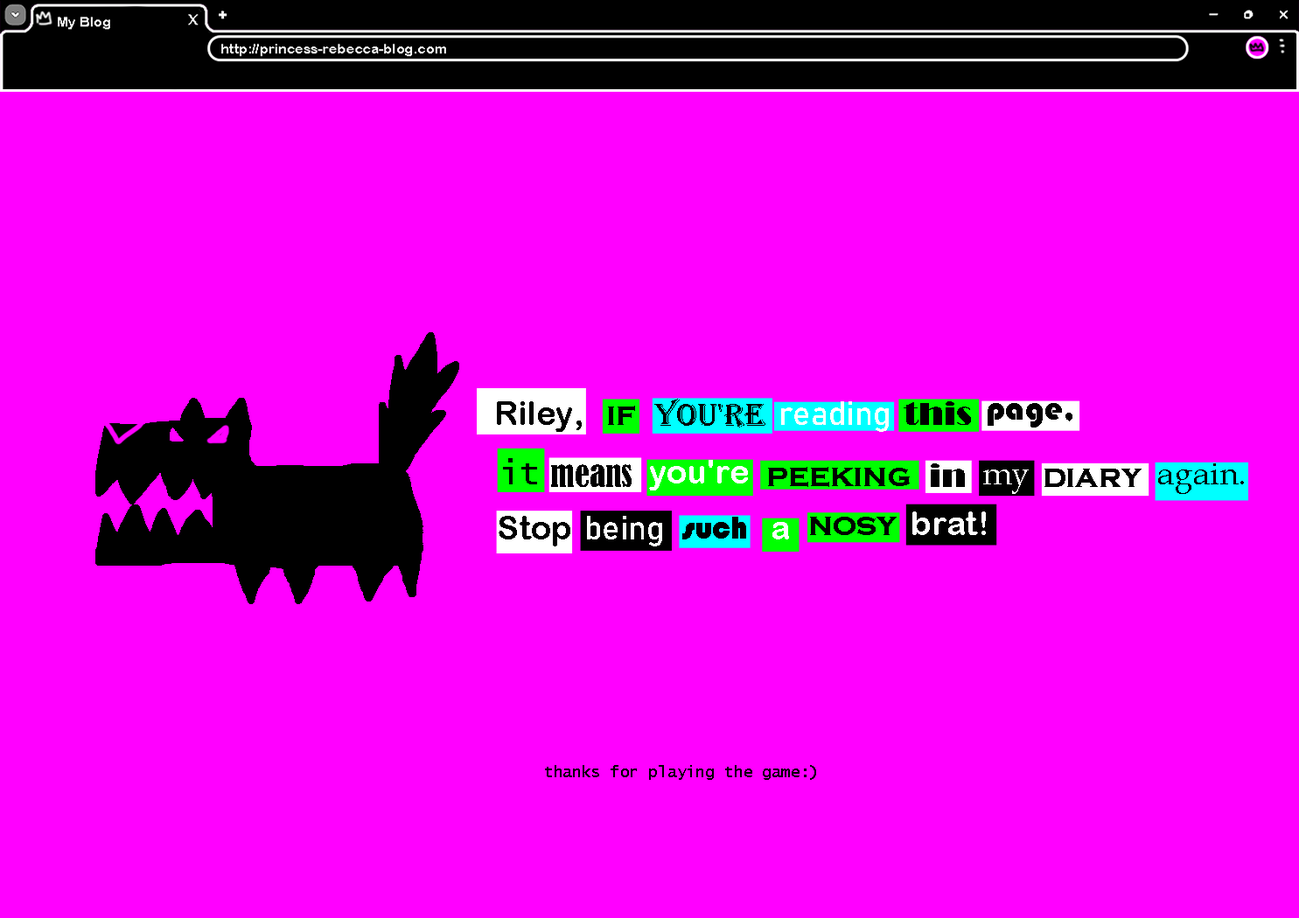
<style>
.page{position:relative;width:1299px;height:918px;background:#ff00ff}
.page>*{position:absolute;margin:0}
.t1{font:33.5px "ArialRoundedMTBold";color:#000000}
.t2{font:33.5px "Algerian";color:#000000}
.t3{font:33.5px "Bahnschrift";color:#ffffff}
.t4{font:33.5px "Broadway";color:#000000}
.t5{font:33.5px "CopperplateGothic-Bold";color:#000000}
.t6{font:33.5px "Bauhaus93";color:#000000}
.t7{font:33.5px "LucidaConsole";color:#000000}
.t8{font:33.5px "ArialRoundedMTBold";color:#ffffff}
.t9{font:33.5px "BernardMT-Condensed";color:#000000}
.t10{font:33.5px "BookAntiqua";color:#ffffff}
.t11{font:33.5px "BookAntiqua";color:#000000}
.t12{font:33.5px "ArialRoundedMTBold";color:#fefefe}
.t13{font:15.7px "LucidaConsole";color:#000000}
</style>
<div class="page">
<p class="t1" style="left:497px;top:401px;width:85px;height:31px">Riley,</p>
<p class="t2" style="left:654px;top:399px;width:111px;height:29px">you're</p>
<p class="t3" style="left:781px;top:401px;width:107px;height:31px">reading</p>
<p class="t4" style="left:903px;top:401px;width:68px;height:24px">this</p>
<p class="t5" style="left:608px;top:406px;width:27px;height:19px">if</p>
<p class="t6" style="left:987px;top:403px;width:85px;height:25px">page,</p>
<p class="t7" style="left:503px;top:458px;width:34px;height:26px">it</p>
<p class="t8" style="left:649px;top:460px;width:99px;height:31px">you're</p>
<p class="t9" style="left:551px;top:464px;width:80px;height:23px">means</p>
<p class="t5" style="left:768px;top:467px;width:141px;height:20px">peeking</p>
<p class="t4" style="left:930px;top:463px;width:35px;height:24px">in</p>
<p class="t10" style="left:983px;top:470px;width:45px;height:24px">my</p>
<p class="t5" style="left:1044px;top:469px;width:97px;height:18px">diary</p>
<p class="t11" style="left:1158px;top:463px;width:86px;height:31px">again.</p>
<p class="t1" style="left:498px;top:516px;width:72px;height:31px">Stop</p>
<p class="t3" style="left:587px;top:516px;width:75px;height:31px">being</p>
<p class="t6" style="left:682px;top:517px;width:64px;height:23px">such</p>
<p class="t5" style="left:810px;top:517px;width:86px;height:18px">nosy</p>
<p class="t8" style="left:912px;top:512px;width:74px;height:23px">brat!</p>
<p class="t12" style="left:772px;top:522px;width:17px;height:18px">a</p>
<p class="t13" style="left:545px;top:765px;width:271px;height:15px">thanks for playing the game:)</p>
</div>
